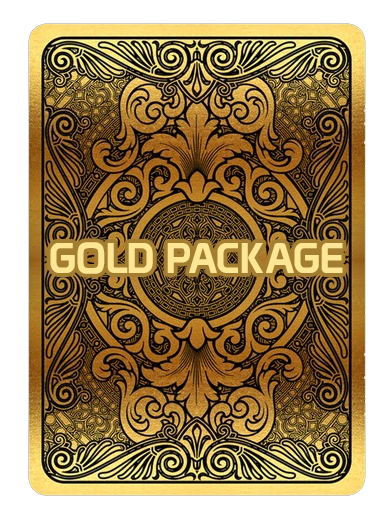
<style>
.page{position:relative;width:388px;height:517px;background:#ffffff}
.page>*{position:absolute;margin:0}
.t1{font:42px "Prototype";color:#fde696}
</style>
<div class="page">
<p class="t1" style="left:50px;top:242px;width:293px;height:32px">GOLD PACKAGE</p>
</div>
